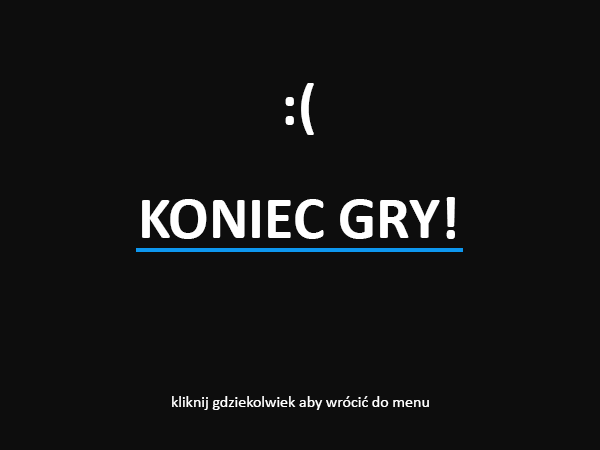
<style>
.page{position:relative;width:600px;height:450px;background:#0d0d0d}
.page>*{position:absolute;margin:0}
.t1{font:60px "Calibri-Bold";color:#ffffff}
.t2{font:16px "Calibri";color:#ffffff}
</style>
<div class="page">
<p class="t1" style="left:285px;top:83px;width:29px;height:52px">:(</p>
<p class="t1" style="left:142px;top:197px;width:313px;height:42px">KONIEC GRY!</p>
<p class="t2" style="left:172px;top:396px;width:257px;height:14px">kliknij gdziekolwiek aby wrócić do menu</p>
</div>
